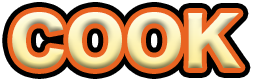
<style>
.page{position:relative;width:253px;height:81px;background:#e96321}
.page>*{position:absolute;margin:0}
.t1{font:66.7px "HiraKakuStdN-W8"}
</style>
<div class="page">
<p class="t1" style="left:12px;top:12px;width:229px;height:57px">COOK</p>
</div>
